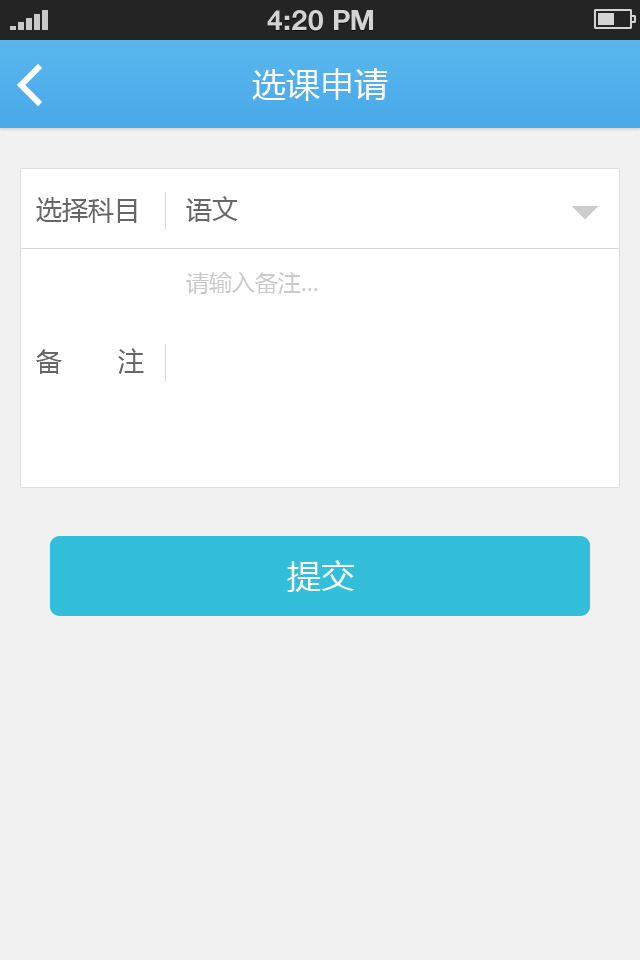
<style>
.page{position:relative;width:640px;height:960px;background:#f1f1f1}
.page>*{position:absolute;margin:0}
.t1{font:28px "HelveticaNeueLTStd-Bd";color:#d3d3d3;text-transform:uppercase}
.t2{font:34px "MicrosoftYaHei";color:#ffffff}
.t3{font:26px "MicrosoftYaHei";color:#676767}
.t4{font:23px "MicrosoftYaHei";color:#cbcaca}
</style>
<div class="page">
<p class="t1" style="left:267px;top:10px;width:106px;height:21px">4:20 PM</p>
<p class="t2" style="left:252px;top:68px;width:136px;height:33px">选课申请</p>
<p class="t3" style="left:36px;top:197px;width:101px;height:26px">选择科目</p>
<p class="t3" style="left:186px;top:196px;width:52px;height:26px">语文</p>
<p class="t4" style="left:186px;top:272px;width:132px;height:22px">请输入备注...</p>
<p class="t3" style="left:36px;top:348px;width:108px;height:26px">备       注</p>
<p class="t2" style="left:287px;top:560px;width:68px;height:32px">提交</p>
</div>
